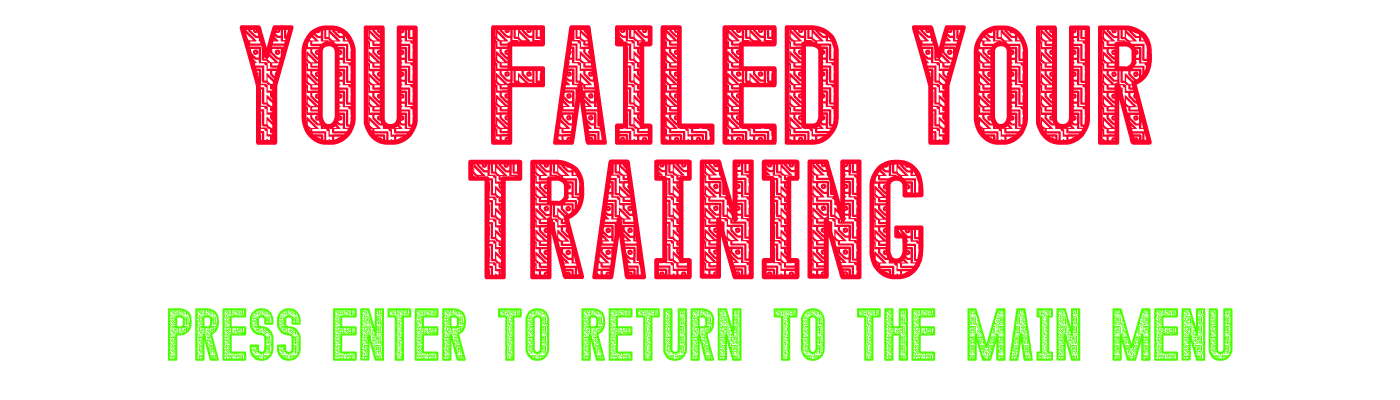
<style>
.page{position:relative;width:1400px;height:400px;background:#ffffff}
.page>*{position:absolute;margin:0}
.t1{font:112.1px "CalenduliaSt";color:#ff002a}
.t2{font:49.3px "CalenduliaSt";color:#4cff00}
</style>
<div class="page">
<p class="t1" style="left:239px;top:25px;width:913px;height:255px;text-align:center">YOU FAILED YOUR<br>TRAINING</p>
<p class="t2" style="left:168px;top:308px;width:1065px;height:53px">Press enter to return to the main menu</p>
</div>
